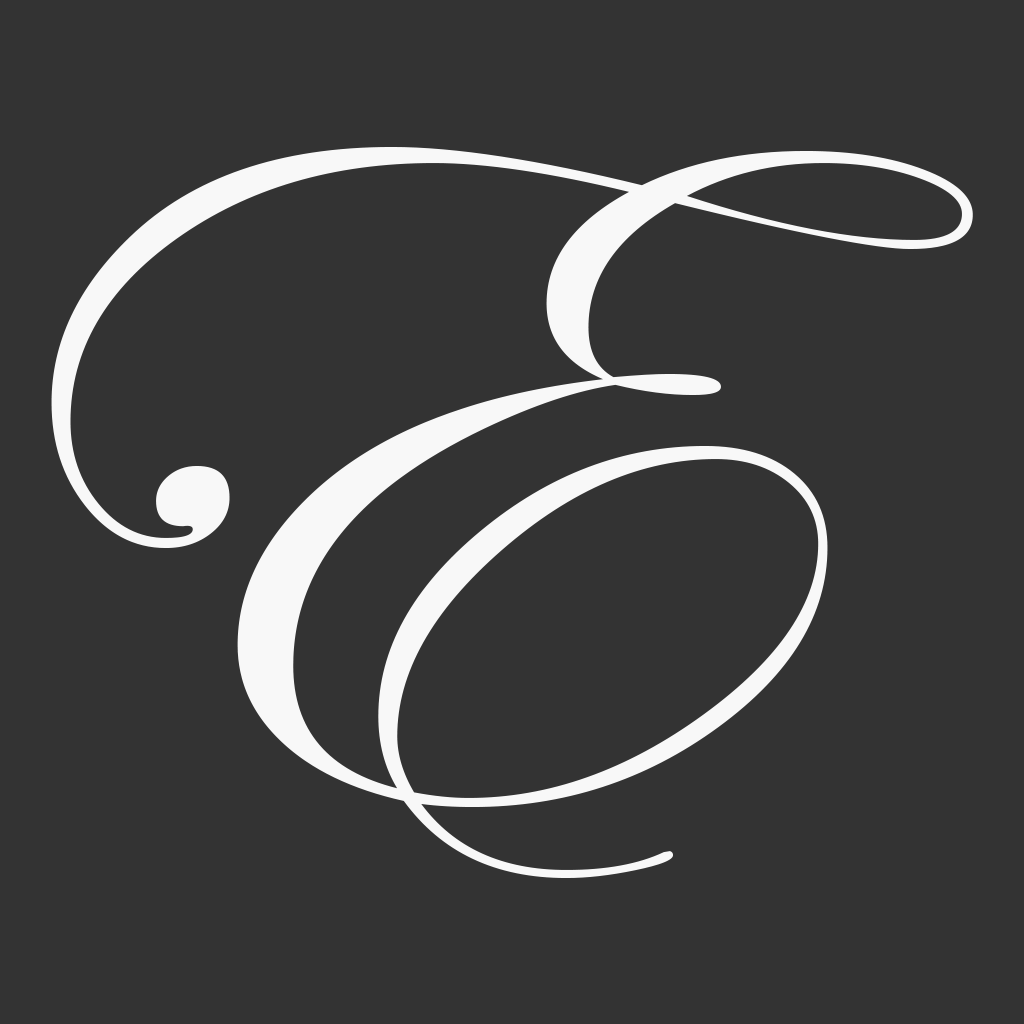
<style>
.page{position:relative;width:1024px;height:1024px;background:#333333}
.page>*{position:absolute;margin:0}
.t1{font:1044px "EdwardianScriptITC";color:#f8f8f8}
</style>
<div class="page">
<p class="t1" style="left:51px;top:147px;width:922px;height:731px">E</p>
</div>
